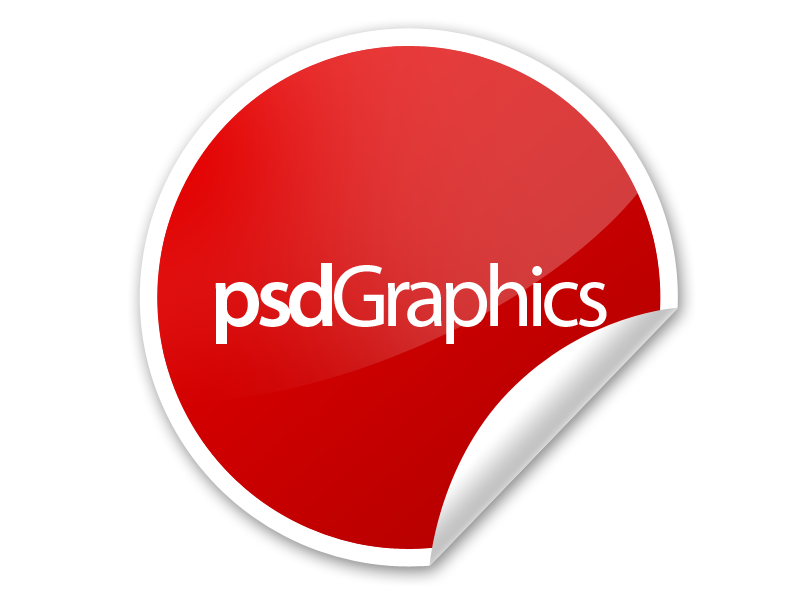
<style>
.page{position:relative;width:800px;height:600px;background:#ffffff}
.page>*{position:absolute;margin:0}
.t1{font:89.1px "MyriadPro-Regular";letter-spacing:-0.075em;color:#ffffff}
.t2{font:89.1px "MyriadPro-Semibold";letter-spacing:-0.075em;color:#ffffff}
</style>
<div class="page">
<p class="t1" style="left:215px;top:263px;width:392px;height:81px"><span class="t2">psd</span>Graphics</p>
</div>
